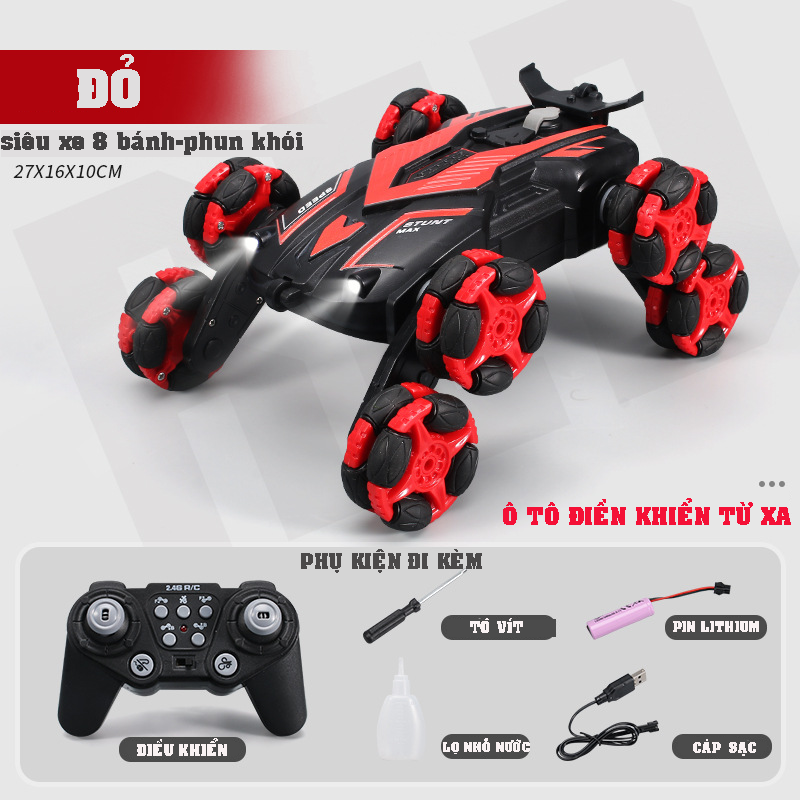
<style>
.page{position:relative;width:800px;height:800px}
.page>*{position:absolute;margin:0}
.t1{font:60px "VNI-Auchon-Bold";color:#e0dedf}
.t2{font:28px "VNI-Auchon-Bold";color:#434142}
.t3{font:28px "VNI-Auchon-Bold";color:#f41036}
.t4{font:24px "VNI-Auchon-Bold";color:#4b4949}
.t5{font:18px "VNI-Auchon-Bold";color:#f9f2f3}
.t6{font:16px "VNI-Auchon-Bold";color:#f9f2f3}
.t7{font:15px "VNI-Auchon-Bold";color:#f9f2f3}
</style>
<div class="page">
<p class="t1" style="left:77px;top:54px;width:63px;height:54px">ÑOÛ</p>
<p class="t2" style="left:1px;top:131px;width:302px;height:24px">sieâu xe 8 baùnh-phun khoùi</p>
<p class="t3" style="left:503px;top:498px;width:288px;height:27px">OÂ TOÂ ÑIEÀN KHIEÅN TÖØ XA</p>
<p class="t4" style="left:301px;top:549px;width:181px;height:24px">PHUÏ KIEÄN ÑI KEØM</p>
<p class="t5" style="left:470px;top:618px;width:53px;height:15px">TOÂ VÍT</p>
<p class="t6" style="left:673px;top:621px;width:86px;height:11px">PIN LITHIUM</p>
<p class="t5" style="left:137px;top:738px;width:90px;height:18px">ÑIEÀU KHIEÅN</p>
<p class="t7" style="left:443px;top:738px;width:87px;height:16px">LOÏ NHOÛÛ NÖÔÙC</p>
<p class="t6" style="left:693px;top:739px;width:63px;height:17px">CAÙP  SAÏC</p>
</div>
